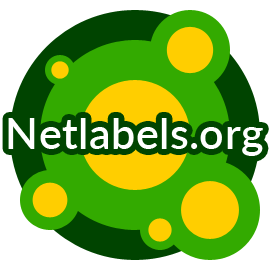
<style>
.page{position:relative;width:270px;height:270px;background:#ffffff}
.page>*{position:absolute;margin:0}
.t1{font:43px "Lato-Semibold";letter-spacing:0.01em;color:#ffffff}
</style>
<div class="page">
<p class="t1" style="left:8px;top:118px;width:255px;height:38px">Netlabels.org</p>
</div>
